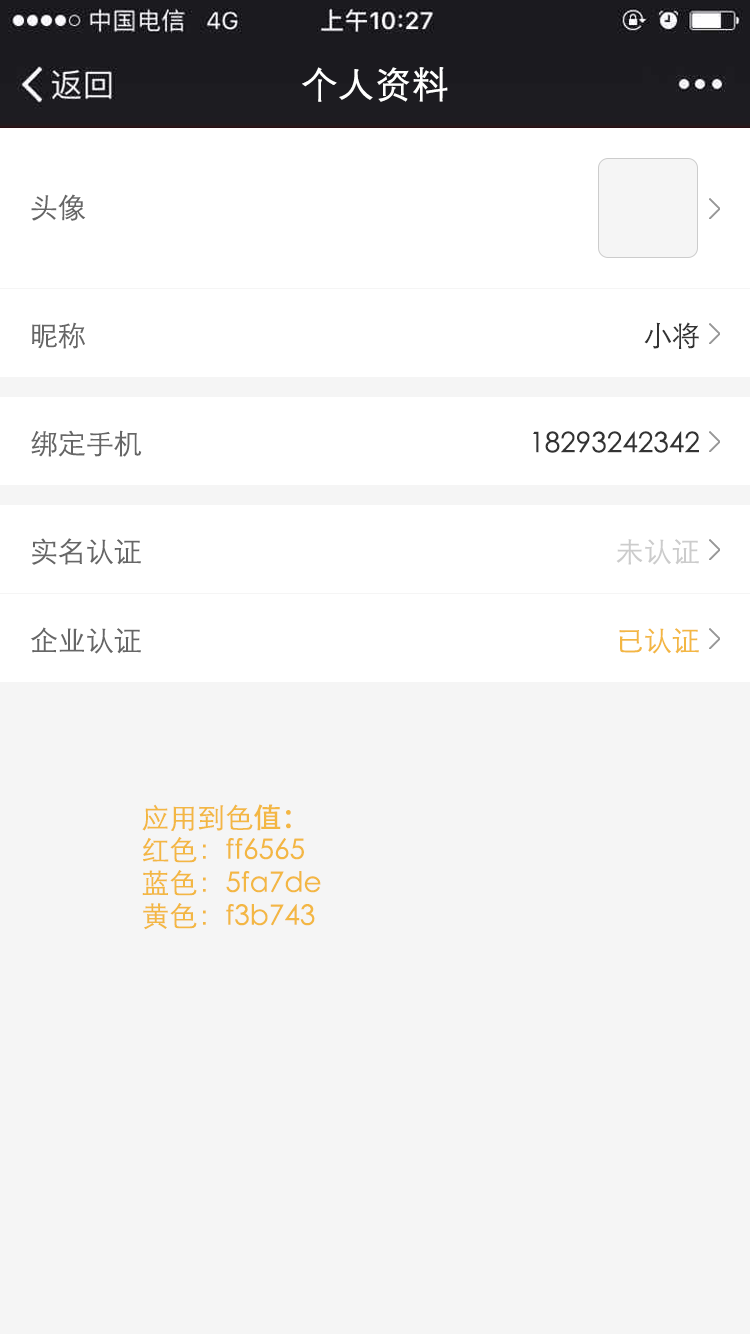
<style>
.page{position:relative;width:750px;height:1334px;background:#f5f5f5}
.page>*{position:absolute;margin:0}
.t1{font:36px "FZZDXJW--GB1-0";color:#ffffff;font-weight:bold}
.t2{font:28px "STXihei";color:#666666}
.t3{font:28px "STXihei";color:#333333}
.t4{font:28px "STXihei";color:#cccccc}
.t5{font:28px "STXihei";color:#f3b743}
.t6{font:28px/33px "STXihei";color:#f3b743}
.t7{font:28px/33px "AdobeHeitiStd-Regular";color:#f3b743}
</style>
<div class="page">
<p class="t1" style="left:302px;top:67px;width:146px;height:35px">个人资料</p>
<p class="t2" style="left:31px;top:194px;width:55px;height:27px">头像</p>
<p class="t2" style="left:32px;top:322px;width:53px;height:27px">昵称</p>
<p class="t3" style="left:644px;top:322px;width:55px;height:27px">小将</p>
<p class="t2" style="left:31px;top:430px;width:111px;height:27px">绑定手机</p>
<p class="t3" style="left:533px;top:431px;width:166px;height:22px">18293242342</p>
<p class="t2" style="left:32px;top:538px;width:109px;height:27px">实名认证</p>
<p class="t4" style="left:616px;top:539px;width:83px;height:26px">未认证</p>
<p class="t2" style="left:30px;top:627px;width:111px;height:27px">企业认证</p>
<p class="t5" style="left:619px;top:628px;width:80px;height:26px">已认证</p>
<p class="t6" style="left:142px;top:804px;width:179px;height:126px">应用到色<span class="t7">值：<br></span>红色：ff6565<br>蓝色：5fa7de<br>黄色：f3b743</p>
</div>
